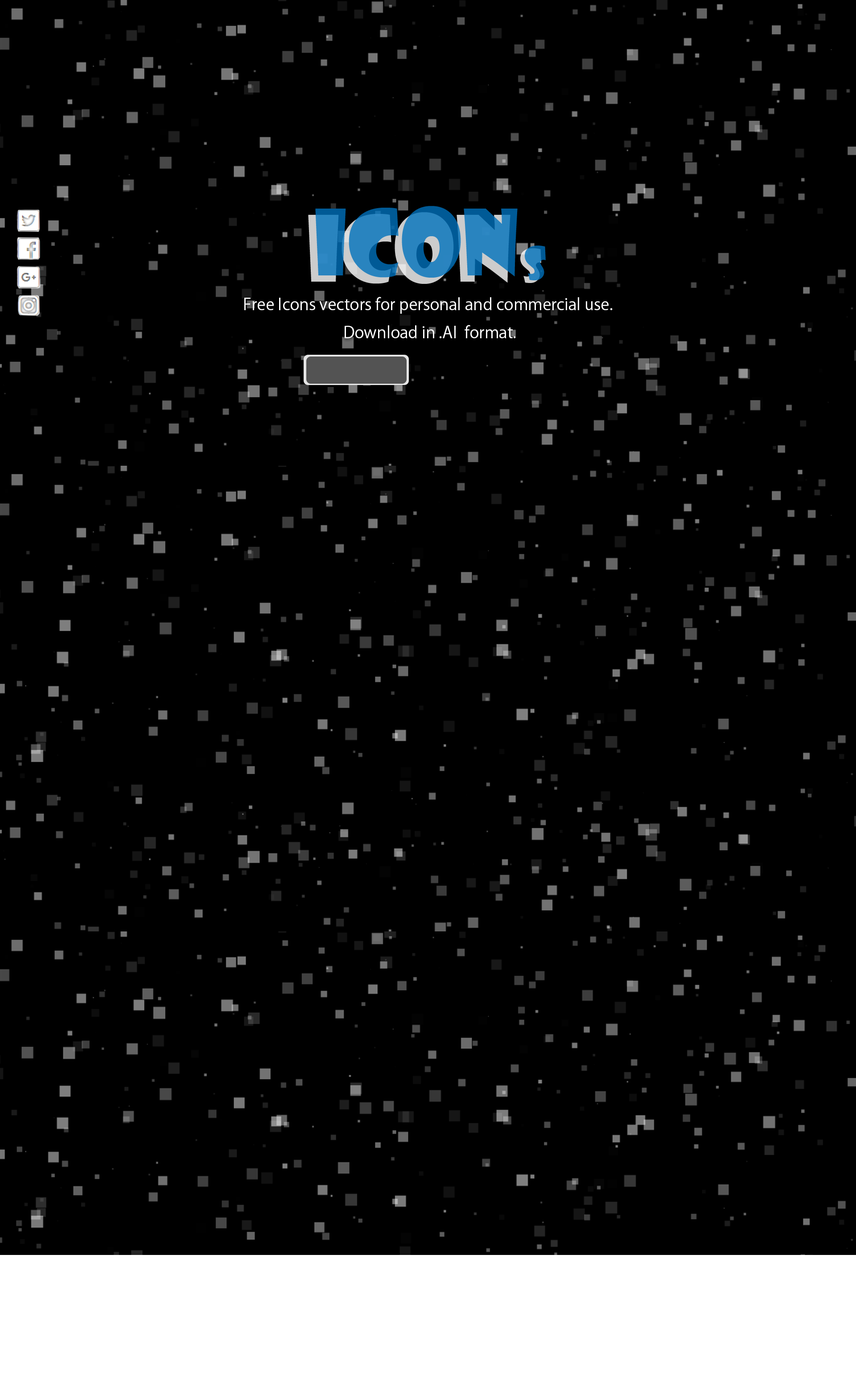
<style>
.page{position:relative;width:856px;height:1394px;background:#000000}
.page>*{position:absolute;margin:0}
.t1{font:16px "KozGoPr6N-Regular";color:#ffffff}
</style>
<div class="page">
<p class="t1" style="left:244px;top:297px;width:368px;height:41px;text-align:center">Free Icons vectors for personal and commercial use. <br>Download in .AI  format.</p>
</div>
